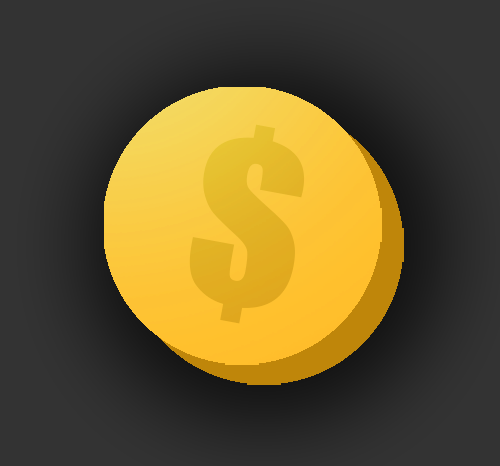
<style>
.page{position:relative;width:500px;height:466px}
.page>*{position:absolute;margin:0}
.t1{font:212px "Impact";color:#e2b325}
</style>
<div class="page">
<p class="t1" style="left:189px;top:124px;width:116px;height:200px;rotate:10deg">$</p>
</div>
